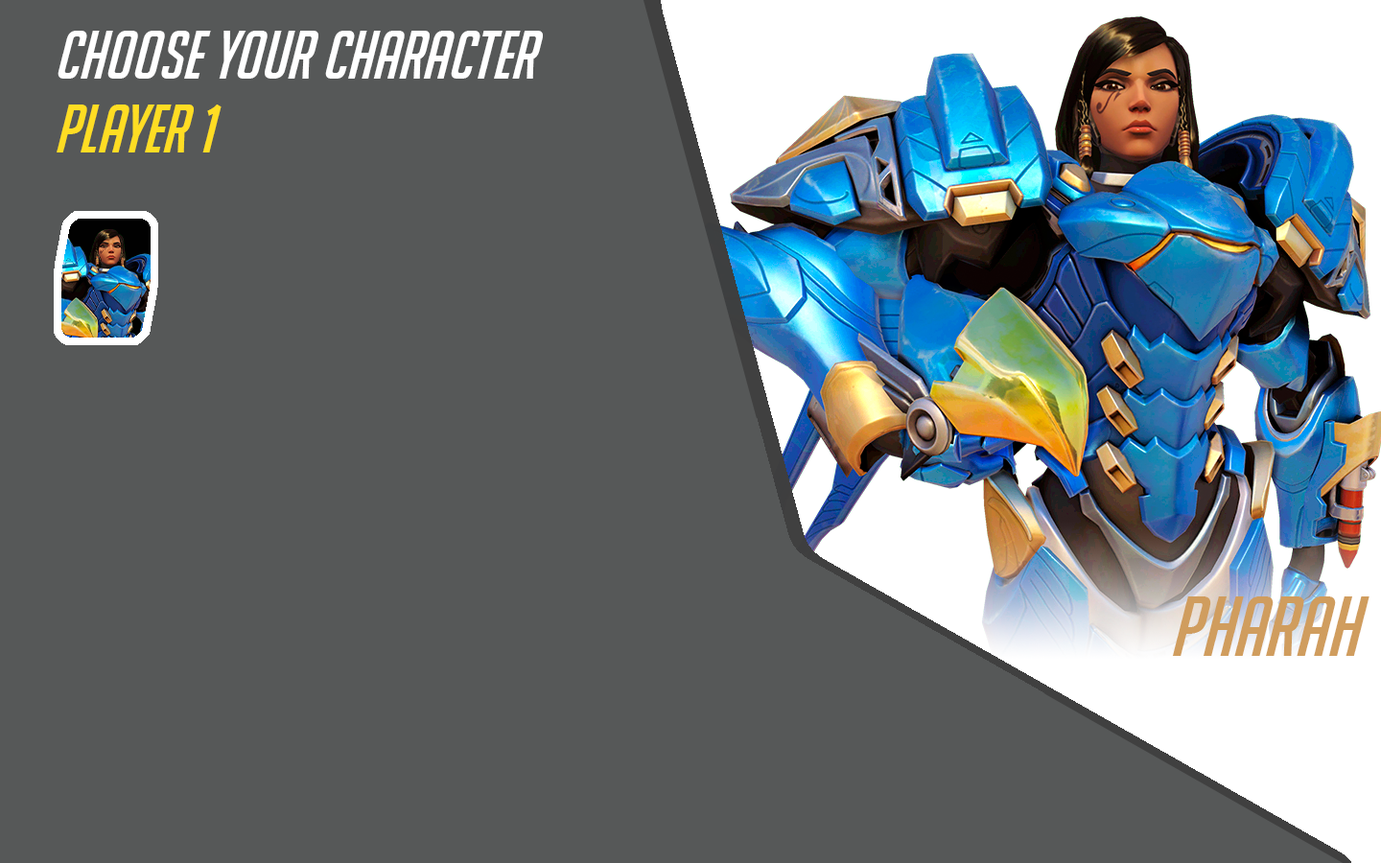
<style>
.page{position:relative;width:1381px;height:863px;background:#565858}
.page>*{position:absolute;margin:0}
.t1{font:66.2px "BigNoodleTooOblique";color:#ffffff}
.t2{font:66.2px "BigNoodleTooOblique";color:#ffdd23}
.t3{font:82.5px "BigNoodleTooOblique";color:#d09d5e}
</style>
<div class="page">
<p class="t1" style="left:58px;top:31px;width:485px;height:48px">Choose Your Character</p>
<p class="t2" style="left:57px;top:105px;width:165px;height:48px">Player 1</p>
<p class="t3" style="left:1172px;top:597px;width:198px;height:59px">Pharah</p>
</div>
